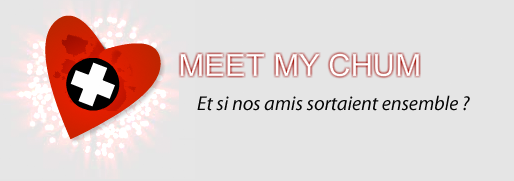
<style>
.page{position:relative;width:514px;height:181px;background:#e5e5e5}
.page>*{position:absolute;margin:0}
.t1{font:20px "MyriadPro-It";color:#060606}
</style>
<div class="page">
<p class="t1" style="left:197px;top:95px;width:273px;height:16px">Et si nos amis sortaient ensemble ?</p>
</div>
